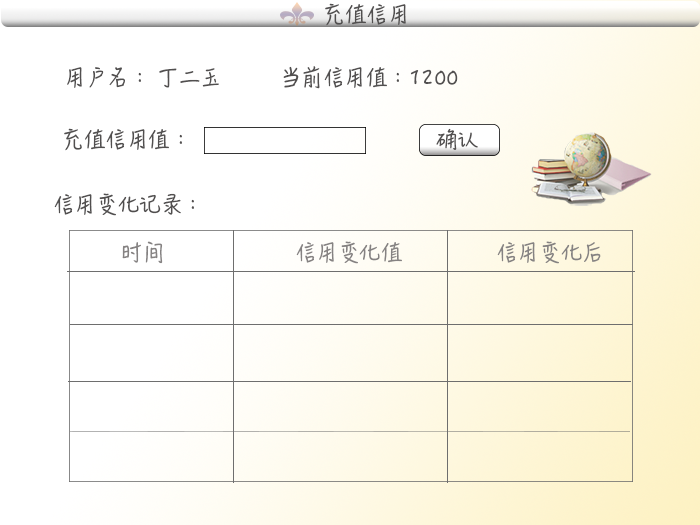
<style>
.page{position:relative;width:700px;height:525px;background:#ffffff}
.page>*{position:absolute;margin:0}
.t1{font:21px "HanziPenSC-W5";letter-spacing:-0.005em;color:#514f4f;text-transform:uppercase}
.t2{font:21px "HanziPenSC-W5";letter-spacing:-0.005em;color:#858282;text-transform:uppercase}
</style>
<div class="page">
<p class="t1" style="left:325px;top:3px;width:81px;height:23px">充值信用</p>
<p class="t1" style="left:67px;top:67px;width:152px;height:21px">用户名： 丁二玉</p>
<p class="t1" style="left:283px;top:66px;width:175px;height:23px">当前信用值：1200</p>
<p class="t1" style="left:64px;top:128px;width:118px;height:23px">充值信用值：</p>
<p class="t1" style="left:436px;top:128px;width:42px;height:22px">确认</p>
<p class="t1" style="left:54px;top:193px;width:140px;height:23px">信用变化记录：</p>
<p class="t2" style="left:122px;top:241px;width:41px;height:23px">时间</p>
<p class="t2" style="left:296px;top:241px;width:106px;height:23px">信用变化值</p>
<p class="t2" style="left:497px;top:241px;width:104px;height:23px">信用变化后</p>
</div>
